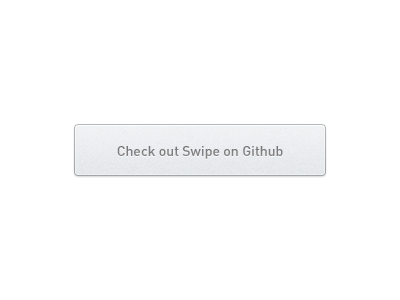
<style>
.page{position:relative;width:400px;height:300px;background:#ffffff}
.page>*{position:absolute;margin:0}
.t1{font:14px "DIN-Medium";color:#808080}
</style>
<div class="page">
<p class="t1" style="left:117px;top:146px;width:166px;height:13px">Check out Swipe on Github</p>
</div>
